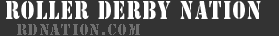
<style>
.page{position:relative;width:279px;height:36px;background:#333333}
.page>*{position:absolute;margin:0}
.t1{font:24px "StencilStd";letter-spacing:0.075em;color:#ffffff;scale:0.77 1}
.t2{font:14px "StencilStd";letter-spacing:0.075em;color:#6f6f6f}
</style>
<div class="page">
<p class="t1" style="left:6px;top:1px;width:255px;height:18px">Roller Derby Nation</p>
<p class="t2" style="left:17px;top:24px;width:123px;height:11px">rdnation.com</p>
</div>
